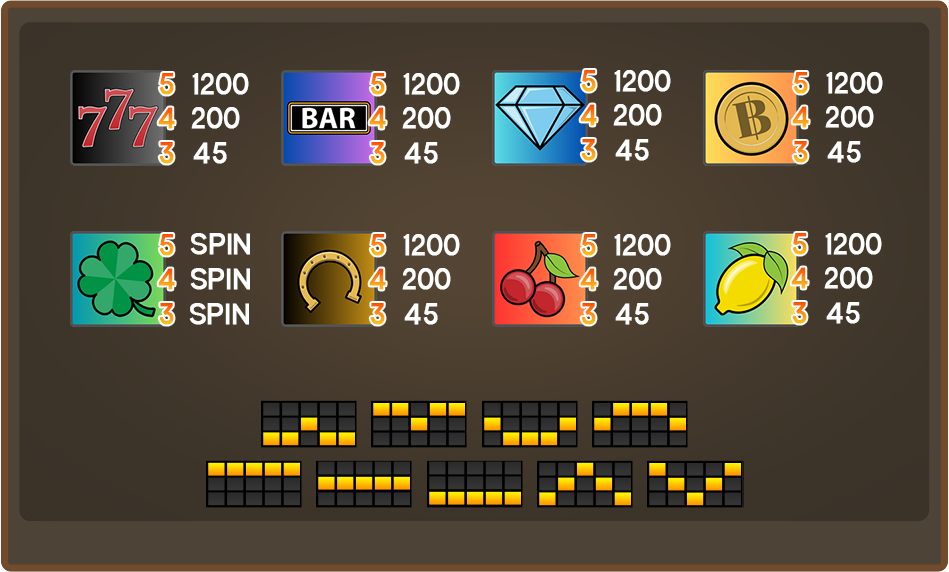
<style>
.page{position:relative;width:949px;height:572px}
.page>*{position:absolute;margin:0}
.t1{font:36px "DMAcademy-Regular";text-transform:uppercase;font-weight:bold}
.t2{font:36px "DMAcademy-Regular";color:#ffffff;text-transform:uppercase;font-weight:bold}
</style>
<div class="page">
<p class="t1" style="left:159px;top:73px;width:15px;height:22px">5</p>
<p class="t2" style="left:192px;top:73px;width:57px;height:22px">1200</p>
<p class="t1" style="left:370px;top:73px;width:15px;height:22px">5</p>
<p class="t2" style="left:403px;top:73px;width:57px;height:22px">1200</p>
<p class="t1" style="left:581px;top:70px;width:15px;height:22px">5</p>
<p class="t2" style="left:614px;top:70px;width:57px;height:22px">1200</p>
<p class="t1" style="left:793px;top:72px;width:15px;height:22px">5</p>
<p class="t2" style="left:826px;top:72px;width:57px;height:22px">1200</p>
<p class="t1" style="left:158px;top:107px;width:17px;height:22px">4</p>
<p class="t2" style="left:191px;top:107px;width:49px;height:22px">200</p>
<p class="t1" style="left:369px;top:107px;width:17px;height:22px">4</p>
<p class="t2" style="left:402px;top:107px;width:49px;height:22px">200</p>
<p class="t1" style="left:580px;top:104px;width:17px;height:22px">4</p>
<p class="t2" style="left:613px;top:104px;width:49px;height:22px">200</p>
<p class="t1" style="left:792px;top:106px;width:17px;height:22px">4</p>
<p class="t2" style="left:825px;top:106px;width:49px;height:22px">200</p>
<p class="t1" style="left:159px;top:142px;width:15px;height:22px">3</p>
<p class="t2" style="left:193px;top:142px;width:34px;height:22px">45</p>
<p class="t1" style="left:370px;top:142px;width:15px;height:22px">3</p>
<p class="t2" style="left:404px;top:142px;width:34px;height:22px">45</p>
<p class="t1" style="left:581px;top:139px;width:15px;height:22px">3</p>
<p class="t2" style="left:615px;top:139px;width:34px;height:22px">45</p>
<p class="t1" style="left:793px;top:141px;width:15px;height:22px">3</p>
<p class="t2" style="left:827px;top:141px;width:34px;height:22px">45</p>
<p class="t2" style="left:190px;top:233px;width:60px;height:22px">SPIN</p>
<p class="t1" style="left:792px;top:233px;width:15px;height:22px">5</p>
<p class="t2" style="left:825px;top:233px;width:57px;height:22px">1200</p>
<p class="t1" style="left:159px;top:234px;width:15px;height:22px">5</p>
<p class="t1" style="left:370px;top:234px;width:15px;height:22px">5</p>
<p class="t2" style="left:403px;top:234px;width:57px;height:22px">1200</p>
<p class="t1" style="left:581px;top:234px;width:15px;height:22px">5</p>
<p class="t2" style="left:614px;top:234px;width:57px;height:22px">1200</p>
<p class="t1" style="left:158px;top:268px;width:17px;height:22px">4</p>
<p class="t2" style="left:190px;top:268px;width:60px;height:22px">SPIN</p>
<p class="t1" style="left:369px;top:268px;width:17px;height:22px">4</p>
<p class="t2" style="left:402px;top:268px;width:49px;height:22px">200</p>
<p class="t1" style="left:580px;top:268px;width:17px;height:22px">4</p>
<p class="t2" style="left:613px;top:268px;width:49px;height:22px">200</p>
<p class="t1" style="left:791px;top:267px;width:17px;height:22px">4</p>
<p class="t2" style="left:824px;top:267px;width:49px;height:22px">200</p>
<p class="t1" style="left:159px;top:303px;width:15px;height:22px">3</p>
<p class="t2" style="left:189px;top:303px;width:60px;height:22px">SPIN</p>
<p class="t1" style="left:370px;top:303px;width:15px;height:22px">3</p>
<p class="t2" style="left:404px;top:303px;width:34px;height:22px">45</p>
<p class="t1" style="left:581px;top:303px;width:15px;height:22px">3</p>
<p class="t2" style="left:615px;top:303px;width:34px;height:22px">45</p>
<p class="t1" style="left:792px;top:302px;width:15px;height:22px">3</p>
<p class="t2" style="left:826px;top:302px;width:34px;height:22px">45</p>
</div>
